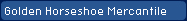
<style>
.page{position:relative;width:187px;height:21px;background:#285692}
.page>*{position:absolute;margin:0}
.t1{font:16px "Foxley816";color:#ffffff}
</style>
<div class="page">
<p class="t1" style="left:5px;top:7px;width:161px;height:8px">Golden Horseshoe Mercantile</p>
</div>
